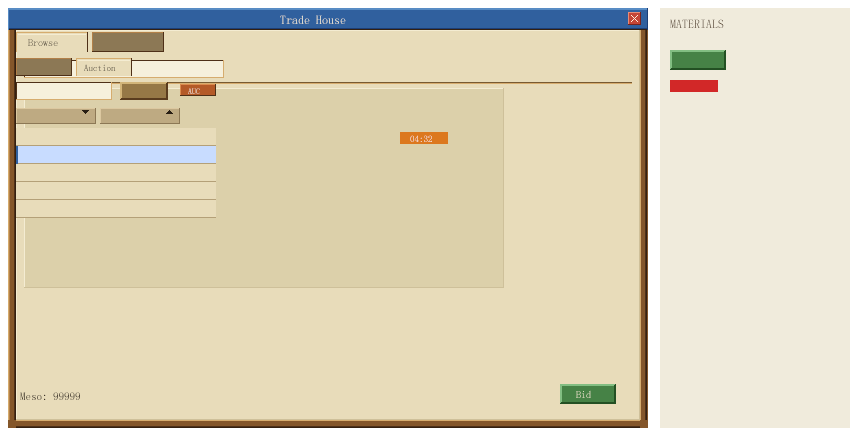
<style>
.page{position:relative;width:860px;height:440px;background:#e8dcba}
.page>*{position:absolute;margin:0}
.t1{font:12px "SimSun"}
.t2{font:10px "SimSun"}
.t3{font:9px "SimSun"}
.t4{font:8px "SimSun"}
.t5{font:11px "SimSun"}
</style>
<div class="page">
<p class="t1" style="left:280px;top:15px;width:66px;height:9px">Trade House</p>
<p class="t1" style="left:670px;top:19px;width:54px;height:9px">MATERIALS</p>
<p class="t2" style="left:28px;top:39px;width:30px;height:7px">Browse</p>
<p class="t3" style="left:84px;top:64px;width:32px;height:7px">Auction</p>
<p class="t4" style="left:188px;top:88px;width:12px;height:6px">AUC</p>
<p class="t3" style="left:410px;top:135px;width:22px;height:7px">04:32</p>
<p class="t2" style="left:576px;top:390px;width:15px;height:8px">Bid</p>
<p class="t5" style="left:20px;top:392px;width:60px;height:8px">Meso: 99999</p>
</div>
